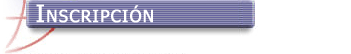
<style>
.page{position:relative;width:351px;height:54px;background:#ffffff}
.page>*{position:absolute;margin:0}
.t1{font:24px "Tahoma";letter-spacing:0.05em;color:#ffffff;font-variant:small-caps;font-weight:bold}
</style>
<div class="page">
<p class="t1" style="left:36px;top:4px;width:117px;height:19px">Inscripción</p>
</div>
